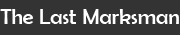
<style>
.page{position:relative;width:180px;height:35px;background:#333333}
.page>*{position:absolute;margin:0}
.t1{font:22px "BerlinSansFB-Reg";color:#ffffff}
</style>
<div class="page">
<p class="t1" style="left:0px;top:9px;width:179px;height:15px">The Last Marksman</p>
</div>
